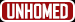
<style>
.page{position:relative;width:75px;height:22px;background:#ffffff}
.page>*{position:absolute;margin:0}
.t1{font:18.7px "AgencyFB-Bold";color:#ffffff}
</style>
<div class="page">
<p class="t1" style="left:7px;top:3px;width:61px;height:16px">UNHOMED</p>
</div>
